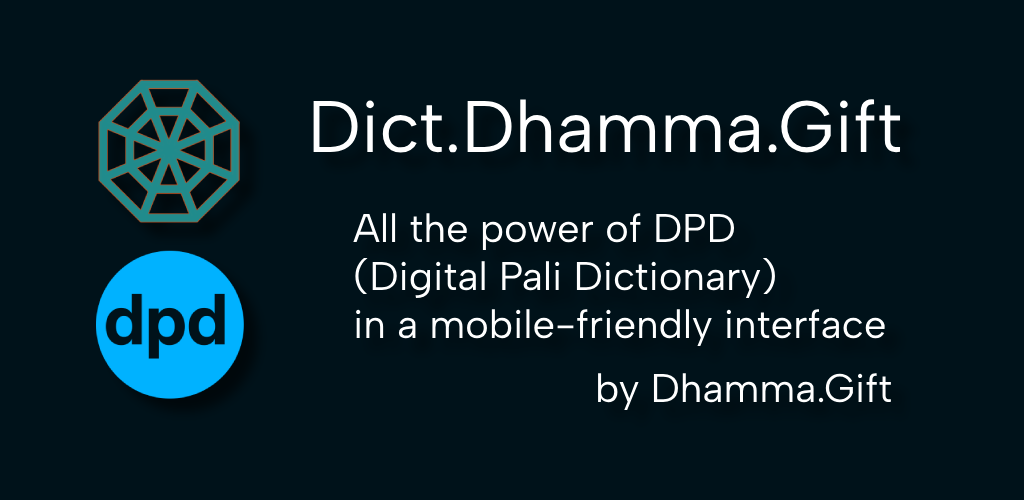
<style>
.page{position:relative;width:1024px;height:500px;background:#00121a}
.page>*{position:absolute;margin:0}
.t1{font:73px "AlbertSans-Regular";color:#ffffff}
.t2{font:40px "AlbertSans-Regular";color:#ffffff}
</style>
<div class="page">
<p class="t1" style="left:313px;top:99px;width:588px;height:54px">Dict.Dhamma.Gift</p>
<p class="t2" style="left:353px;top:213px;width:532px;height:133px">All the power of DPD<br>(Digital Pali Dictionary) <br>in a mobile-friendly interface</p>
<p class="t2" style="left:598px;top:373px;width:293px;height:37px">by Dhamma.Gift</p>
</div>
